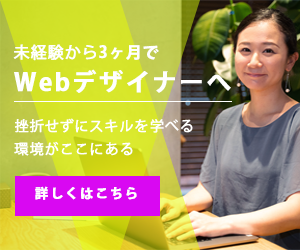
<style>
.page{position:relative;width:300px;height:250px}
.page>*{position:absolute;margin:0}
.t1{font:16px "KozGoPr6N-Regular";letter-spacing:0.05em;color:#ffffff;font-weight:bold}
.t2{font:16px "KozGoPr6N-Bold";letter-spacing:0.05em;color:#ffffff;font-weight:bold}
.t3{font:24px "KozGoPr6N-Bold";letter-spacing:0.08em;color:#ffffff;font-weight:bold}
.t4{font:13px "KozGoPr6N-Bold";letter-spacing:0.1em;color:#ffffff;font-weight:bold}
</style>
<div class="page">
<p class="t1" style="left:13px;top:44px;width:146px;height:17px">未経験から<span class="t2">3ヶ月で</span></p>
<p class="t3" style="left:14px;top:69px;width:217px;height:24px">Webデザイナーへ</p>
<p class="t4" style="left:35px;top:186px;width:102px;height:14px">詳しくはこちら</p>
</div>
